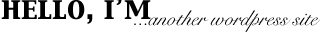
<style>
.page{position:relative;width:320px;height:32px;background:#ffffff}
.page>*{position:absolute;margin:0}
.t1{font:21px "SnellRoundhand";color:#000000}
</style>
<div class="page">
<p class="t1" style="left:134px;top:10px;width:186px;height:22px">...another wordpress site</p>
</div>
